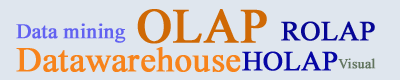
<style>
.page{position:relative;width:400px;height:80px;background:#dfe6ee}
.page>*{position:absolute;margin:0}
.t1{font:48.6px "TimesNewRomanPSMT";color:#cf6905;font-weight:bold}
.t2{font:20.8px "TimesNewRomanPSMT";color:#6262f1;font-weight:bold}
.t3{font:27.7px "TimesNewRomanPSMT";color:#060695;font-weight:bold}
.t4{font:34.6px "TimesNewRomanPSMT";color:#f7831b;font-weight:bold}
.t5{font:27.7px "TimesNewRomanPSMT";color:#0606a4;font-weight:bold}
.t6{font:13.8px "TimesNewRomanPSMT";color:#62755f;font-weight:bold}
</style>
<div class="page">
<p class="t1" style="left:137px;top:9px;width:130px;height:35px">OLAP</p>
<p class="t2" style="left:16px;top:23px;width:110px;height:20px">Data mining</p>
<p class="t3" style="left:281px;top:21px;width:94px;height:20px">ROLAP</p>
<p class="t4" style="left:16px;top:47px;width:225px;height:25px">Datawarehouse</p>
<p class="t5" style="left:242px;top:51px;width:96px;height:20px">HOLAP</p>
<p class="t6" style="left:338px;top:58px;width:38px;height:11px">Visual</p>
</div>
